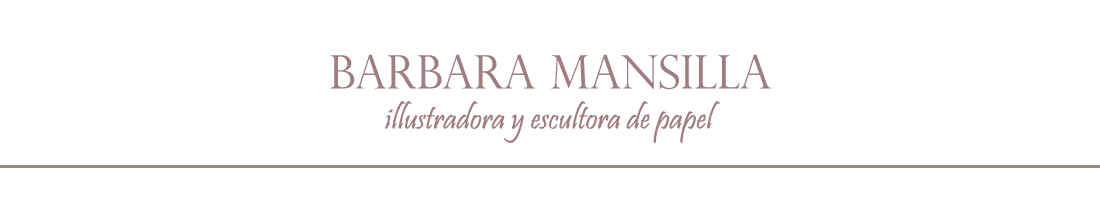
<style>
.page{position:relative;width:1100px;height:200px;background:#ffffff}
.page>*{position:absolute;margin:0}
.t1{font:33.3px "Pristina-Regular";color:#9f7d81}
.t2{font:37.5px "Pristina-Regular";color:#9f7d81}
.t3{font:45.8px "PerpetuaTitlingMT-Light";color:#9f7d81}
</style>
<div class="page">
<p class="t1" style="left:330px;top:54px;width:441px;height:90px;text-align:center"><span class="t2">        </span><span class="t3">barbara mansilla    <br></span>illustradora y escultora de papel</p>
</div>
